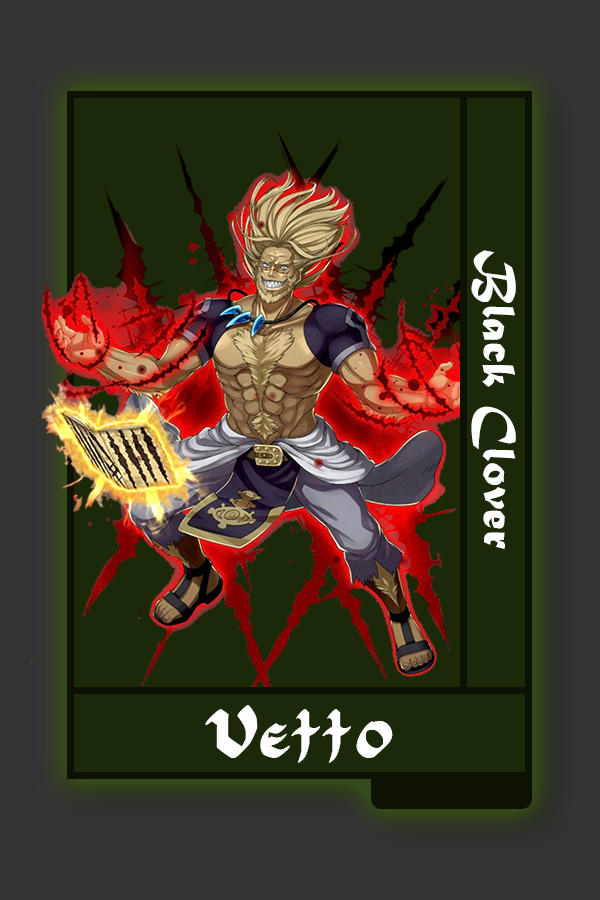
<style>
.page{position:relative;width:600px;height:900px;background:#1b2908}
.page>*{position:absolute;margin:0}
.t1{font:48.8px "MaturaMTScriptCapitals";color:#ffffff}
.t2{font:59.7px "FloranteatLaura";color:#ffffff}
</style>
<div class="page">
<p class="t1" style="left:471px;top:250px;width:45px;height:299px;rotate:90deg">Black Clover</p>
<p class="t2" style="left:205px;top:705px;width:188px;height:58px">Vetto</p>
</div>
